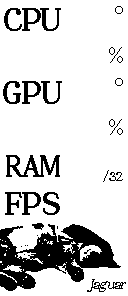
<style>
.page{position:relative;width:128px;height:296px;background:#ffffff}
.page>*{position:absolute;margin:0}
.t1{font:24.7px "Destine_PersonalUse-Regular";letter-spacing:-0.02em;color:#000000;text-transform:uppercase}
.t2{font:30.9px "Destine_PersonalUse-Regular";letter-spacing:-0.02em;color:#000000;text-transform:uppercase;font-weight:bold}
.t3{font:18.5px "Destine_PersonalUse-Regular";letter-spacing:-0.02em;color:#000000;text-transform:uppercase}
.t4{font:29.7px "Destine_PersonalUse-Regular";letter-spacing:-0.02em;color:#000000;text-transform:uppercase;font-weight:bold;scale:0.83 1}
.t5{font:12.4px "Destine_PersonalUse-Regular";letter-spacing:-0.02em;color:#000000;text-transform:uppercase}
.t6{font:30.9px "Destine_PersonalUse-Regular";letter-spacing:0.02em;color:#000000;text-transform:uppercase;font-weight:bold}
.t7{font:13.9px "Destine_PersonalUse-Regular";letter-spacing:-0.02em;color:#000000;font-style:italic}
</style>
<div class="page">
<p class="t1" style="left:115px;top:6px;width:8px;height:8px">°</p>
<p class="t2" style="left:4px;top:8px;width:57px;height:23px">CPU</p>
<p class="t3" style="left:109px;top:47px;width:14px;height:16px">%</p>
<p class="t1" style="left:115px;top:78px;width:8px;height:8px">°</p>
<p class="t2" style="left:3px;top:81px;width:59px;height:23px">GPU</p>
<p class="t3" style="left:109px;top:119px;width:14px;height:16px">%</p>
<p class="t4" style="left:6px;top:155px;width:54px;height:22px">RAM</p>
<p class="t5" style="left:103px;top:170px;width:20px;height:12px">/32</p>
<p class="t6" style="left:5px;top:192px;width:55px;height:23px">FPS</p>
<p class="t7" style="left:87px;top:279px;width:39px;height:13px">Jaguar</p>
</div>
